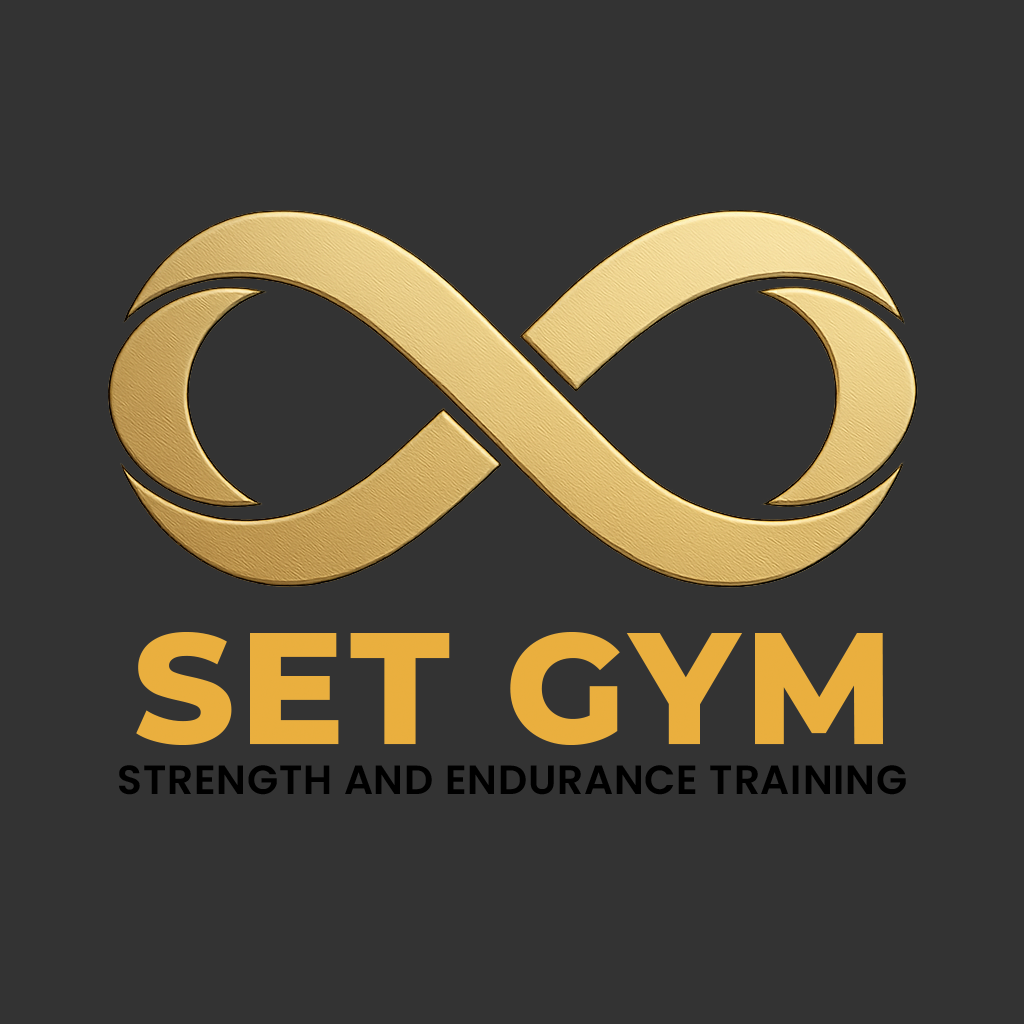
<style>
.page{position:relative;width:1024px;height:1024px;background:#333333}
.page>*{position:absolute;margin:0}
.t1{font:157.2px "Montserrat-ExtraBold";letter-spacing:0.03em;color:#eaaf3e}
.t2{font:40.7px "Poppins-SemiBold";letter-spacing:0.02em;color:#000000;text-transform:uppercase}
</style>
<div class="page">
<p class="t1" style="left:136px;top:632px;width:747px;height:113px">SET GYM</p>
<p class="t2" style="left:119px;top:765px;width:787px;height:30px">Strength AND Endurance Training</p>
</div>
